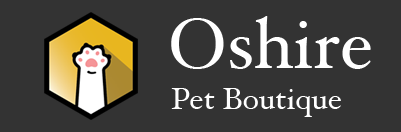
<style>
.page{position:relative;width:401px;height:132px;background:#333333}
.page>*{position:absolute;margin:0}
.t1{font:72px "HoeflerText";color:#ffffff}
.t2{font:29.7px "HoeflerText";color:#ffffff;scale:1.04 1}
</style>
<div class="page">
<p class="t1" style="left:171px;top:16px;width:200px;height:53px">Oshire</p>
<p class="t2" style="left:171px;top:88px;width:170px;height:29px">Pet Boutique</p>
</div>
